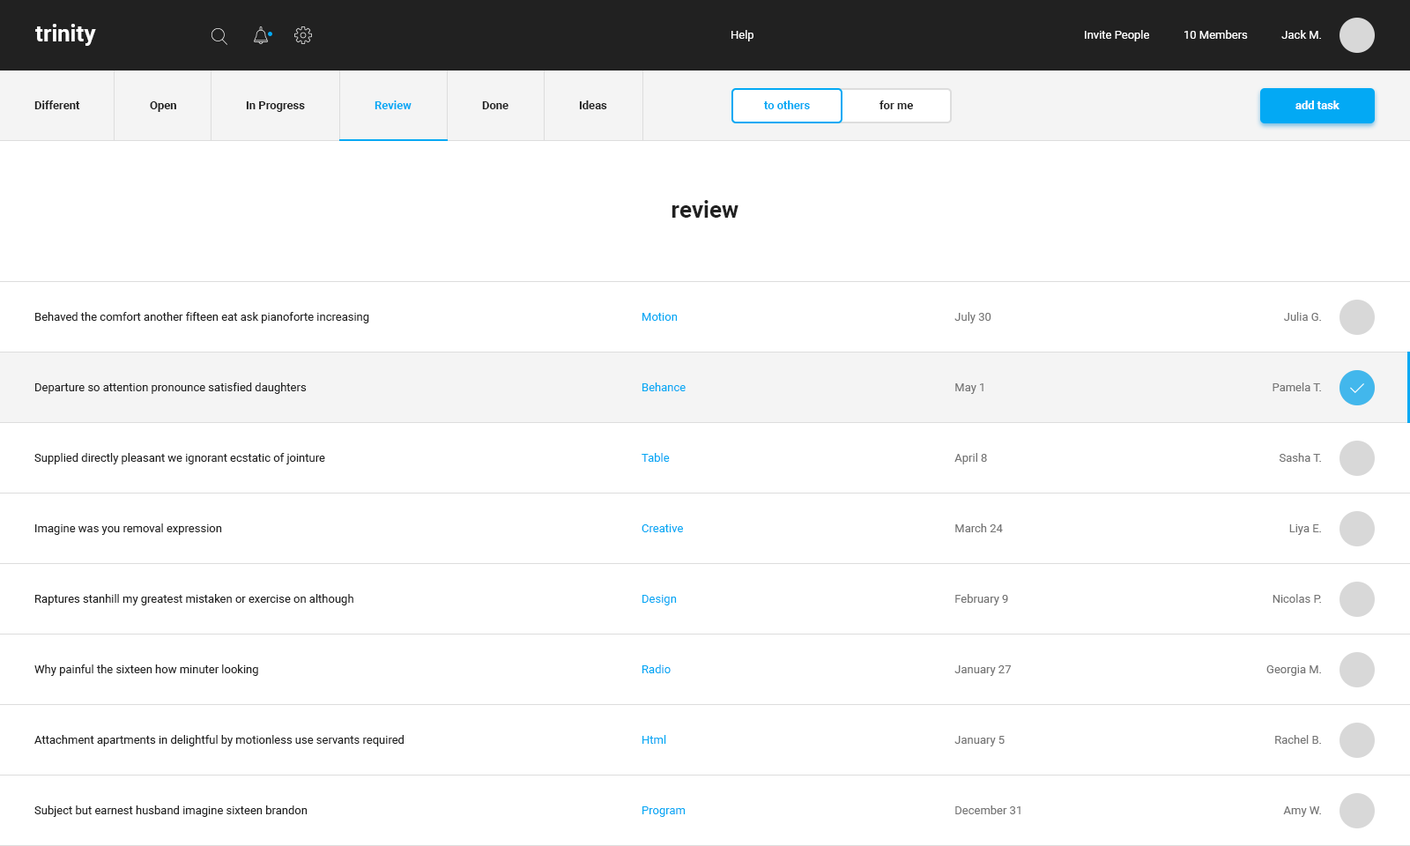
<style>
.page{position:relative;width:1410px;height:846px;background:#ffffff}
.page>*{position:absolute;margin:0}
.t1{font:22.9px "Roboto-Bold";color:#ffffff}
.t2{font:11.5px "Roboto-Regular";color:#ffffff}
.t3{font:11.5px "Roboto-Bold";color:#212121}
.t4{font:11.5px "Roboto-Bold";color:#03a9f4}
.t5{font:11.5px "Roboto-Bold";color:#ffffff}
.t6{font:22.9px "Roboto-Bold";color:#212121}
.t7{font:11.5px "Roboto-Regular";color:#212121}
.t8{font:11.5px "Roboto-Regular";color:#03a9f4}
.t9{font:11.5px "Roboto-Regular";color:#757575}
</style>
<div class="page">
<p class="t1" style="left:35px;top:24px;width:61px;height:22px">trinity</p>
<p class="t2" style="left:731px;top:30px;width:22px;height:11px">Help</p>
<p class="t2" style="left:1085px;top:30px;width:236px;height:11px">Invite People            10 Members            Jack M.</p>
<p class="t3" style="left:34px;top:100px;width:46px;height:9px">Different</p>
<p class="t3" style="left:150px;top:101px;width:26px;height:11px">Open</p>
<p class="t3" style="left:246px;top:101px;width:59px;height:11px">In Progress</p>
<p class="t4" style="left:374px;top:100px;width:37px;height:9px">Review</p>
<p class="t3" style="left:482px;top:101px;width:26px;height:8px">Done</p>
<p class="t3" style="left:579px;top:100px;width:28px;height:9px">Ideas</p>
<p class="t4" style="left:763px;top:100px;width:47px;height:9px">to others</p>
<p class="t3" style="left:879px;top:100px;width:34px;height:9px">for me</p>
<p class="t5" style="left:1295px;top:100px;width:44px;height:9px">add task</p>
<p class="t6" style="left:671px;top:200px;width:67px;height:18px">review</p>
<p class="t7" style="left:35px;top:312px;width:334px;height:11px">Behaved the comfort another fifteen eat ask pianoforte increasing</p>
<p class="t8" style="left:642px;top:313px;width:36px;height:8px">Motion</p>
<p class="t9" style="left:954px;top:312px;width:37px;height:11px">July 30</p>
<p class="t9" style="left:1284px;top:312px;width:37px;height:9px">Julia G.</p>
<p class="t7" style="left:35px;top:382px;width:272px;height:12px">Departure so attention pronounce satisfied daughters</p>
<p class="t8" style="left:642px;top:382px;width:43px;height:9px">Behance</p>
<p class="t9" style="left:955px;top:383px;width:28px;height:11px">May 1</p>
<p class="t9" style="left:1272px;top:382px;width:49px;height:9px">Pamela T.</p>
<p class="t7" style="left:34px;top:453px;width:291px;height:11px">Supplied directly pleasant we ignorant ecstatic of jointure</p>
<p class="t8" style="left:641px;top:453px;width:29px;height:9px">Table</p>
<p class="t9" style="left:954px;top:453px;width:33px;height:11px">April 8</p>
<p class="t9" style="left:1278px;top:453px;width:43px;height:9px">Sasha T.</p>
<p class="t7" style="left:35px;top:523px;width:187px;height:12px">Imagine was you removal expression</p>
<p class="t8" style="left:641px;top:524px;width:42px;height:8px">Creative</p>
<p class="t9" style="left:955px;top:523px;width:48px;height:9px">March 24</p>
<p class="t9" style="left:1289px;top:524px;width:32px;height:11px">Liya E.</p>
<p class="t7" style="left:34px;top:594px;width:319px;height:11px">Raptures stanhill my greatest mistaken or exercise on although</p>
<p class="t9" style="left:955px;top:594px;width:53px;height:11px">February 9</p>
<p class="t9" style="left:1272px;top:594px;width:49px;height:9px">Nicolas P.</p>
<p class="t8" style="left:642px;top:595px;width:35px;height:10px">Design</p>
<p class="t7" style="left:34px;top:664px;width:224px;height:12px">Why painful the sixteen how minuter looking</p>
<p class="t8" style="left:641px;top:664px;width:30px;height:9px">Radio</p>
<p class="t9" style="left:954px;top:665px;width:57px;height:11px">January 27</p>
<p class="t9" style="left:1266px;top:665px;width:55px;height:11px">Georgia M.</p>
<p class="t7" style="left:34px;top:735px;width:370px;height:11px">Attachment apartments in delightful by motionless use servants required</p>
<p class="t8" style="left:642px;top:735px;width:24px;height:9px">Html</p>
<p class="t9" style="left:954px;top:736px;width:50px;height:10px">January 5</p>
<p class="t9" style="left:1275px;top:735px;width:46px;height:9px">Rachel B.</p>
<p class="t7" style="left:34px;top:805px;width:274px;height:12px">Subject but earnest husband imagine sixteen brandon</p>
<p class="t8" style="left:642px;top:806px;width:43px;height:11px">Program</p>
<p class="t9" style="left:955px;top:805px;width:65px;height:9px">December 31</p>
<p class="t9" style="left:1283px;top:806px;width:38px;height:11px">Amy W.</p>
</div>
